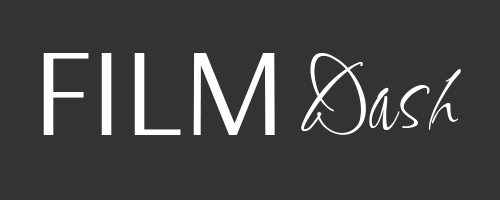
<style>
.page{position:relative;width:500px;height:200px;background:#333333}
.page>*{position:absolute;margin:0}
.t1{font:125px "Arsenal-Regular";color:#ffffff}
.t2{font:125px "SassyFrass-Regular";color:#ffffff}
</style>
<div class="page">
<p class="t1" style="left:43px;top:53px;width:232px;height:82px">FILM</p>
<p class="t2" style="left:301px;top:53px;width:160px;height:82px">Dash</p>
</div>
